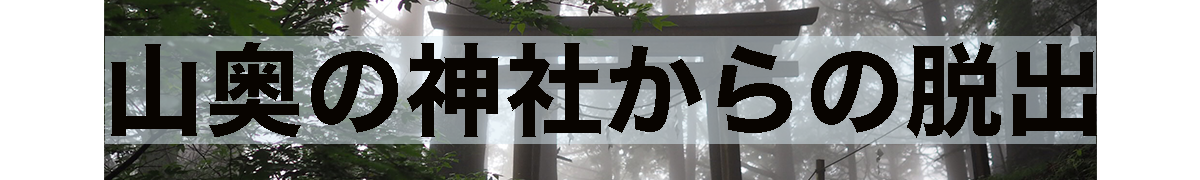
<style>
.page{position:relative;width:1200px;height:180px}
.page>*{position:absolute;margin:0}
.t1{font:100px "HiraginoSans-W7";color:#080400}
</style>
<div class="page">
<p class="t1" style="left:111px;top:42px;width:986px;height:96px">山奥の神社からの脱出</p>
</div>
